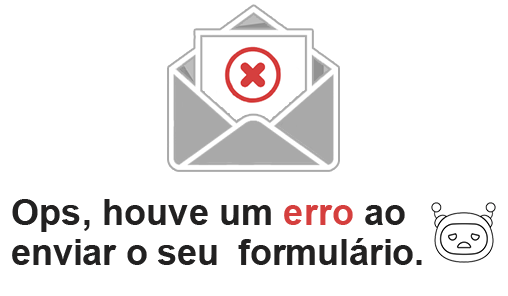
<style>
.page{position:relative;width:508px;height:296px;background:#ffffff}
.page>*{position:absolute;margin:0}
.t1{font:36.3px/40px "Arial-BoldMT";letter-spacing:-0.01em;color:#222121}
.t2{font:36.3px/40px "Arial-BoldMT";color:#222121}
.t3{font:36.3px/40px "Arial-BoldMT";color:#d53f3e}
</style>
<div class="page">
<p class="t1" style="left:12px;top:199px;width:410px;height:66px"><span class="t2">Ops, houve um </span><span class="t3">erro </span><span class="t2">ao <br></span>enviar o seu  formulário<span class="t2">.</span></p>
</div>
